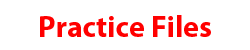
<style>
.page{position:relative;width:250px;height:50px;background:#ffffff}
.page>*{position:absolute;margin:0}
.t1{font:30px "MyriadPro-Bold";color:#fe0000}
</style>
<div class="page">
<p class="t1" style="left:40px;top:15px;width:171px;height:22px">Practice Files</p>
</div>
